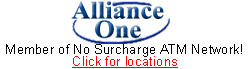
<style>
.page{position:relative;width:250px;height:69px;background:#ffffff}
.page>*{position:absolute;margin:0}
.t1{font:13px/12px "ArialMT";color:#000000}
.t2{font:13px/12px "ArialMT";color:#ff0000;text-decoration:underline}
</style>
<div class="page">
<p class="t1" style="left:6px;top:44px;width:236px;height:24px;text-align:center">Member of No Surcharge ATM Network!<br><span class="t2">Click for locations</span></p>
</div>
